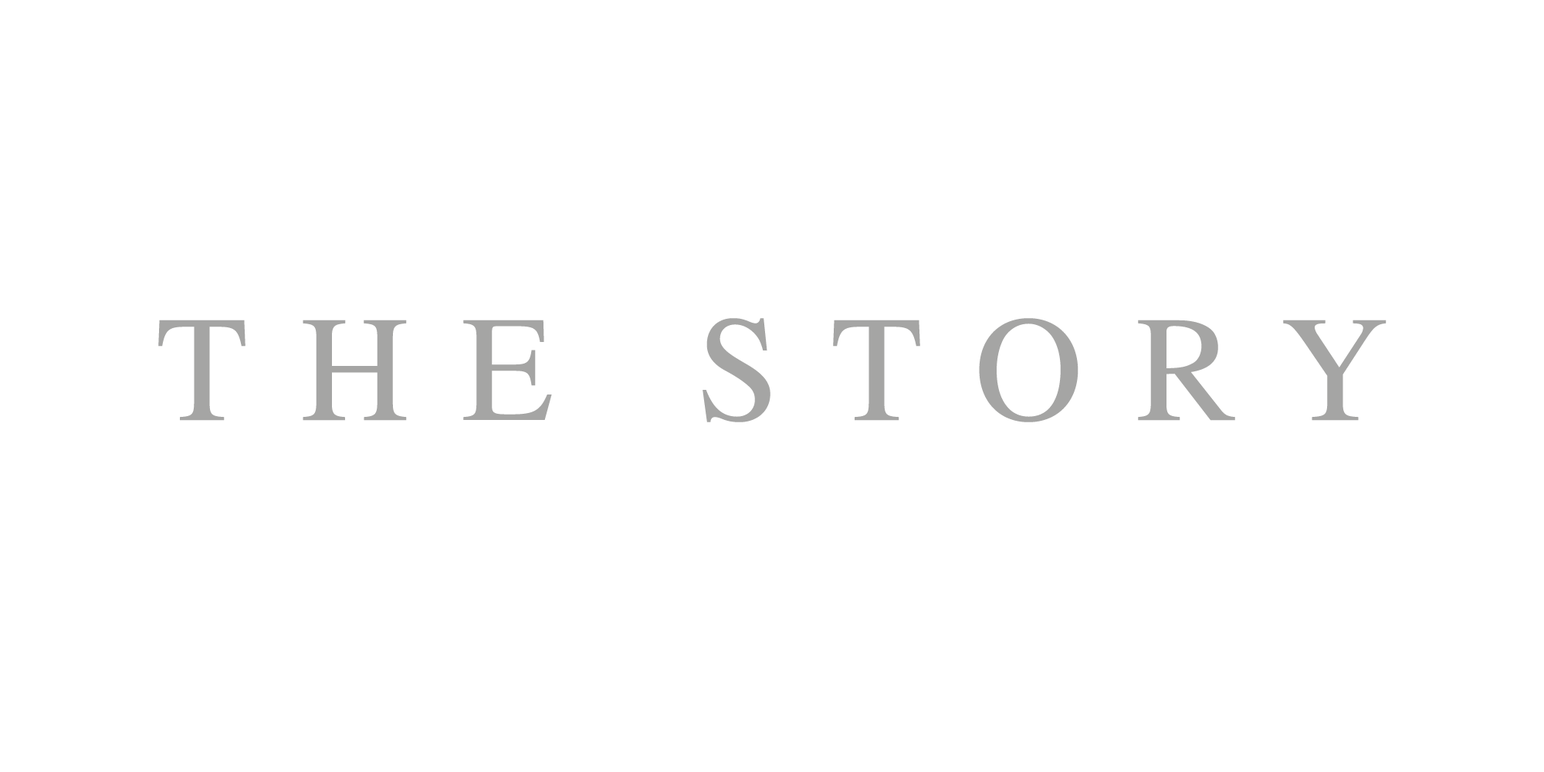
<style>
.page{position:relative;width:1544px;height:772px;background:#ffffff}
.page>*{position:absolute;margin:0}
.t1{font:150.6px "STIXGeneral-Regular";letter-spacing:0.35em;color:#a5a5a4}
</style>
<div class="page">
<p class="t1" style="left:158px;top:318px;width:1229px;height:104px">THE STORY</p>
</div>
